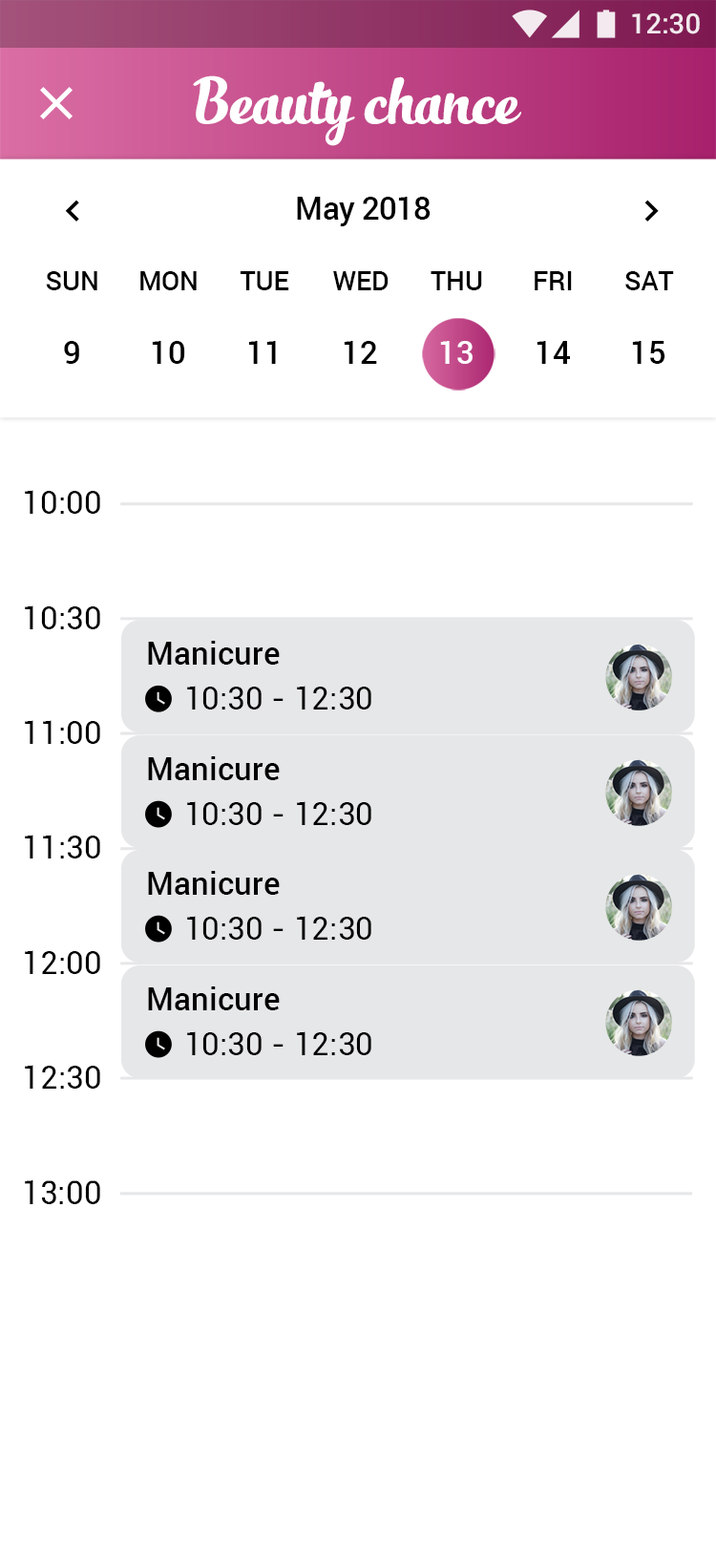
<style>
.page{position:relative;width:716px;height:1568px;background:#ffffff}
.page>*{position:absolute;margin:0}
.t1{font:27.8px "Roboto-Medium";color:#ffffff}
.t2{font:47.7px "SlimTony-Italic";color:#ffffff}
.t3{font:31.8px "Roboto-Medium";letter-spacing:-0.023em;color:#000000}
.t4{font:26.4px "Roboto-Medium";color:#000000}
.t5{font:31.8px "Roboto-Medium";color:#000000}
.t6{font:31.8px "Roboto-Medium";color:#ffffff}
.t7{font:31.8px "Roboto-Regular";color:#000000}
.t8{font:32.3px "Roboto-Regular";color:#000000}
</style>
<div class="page">
<p class="t1" style="left:632px;top:13px;width:68px;height:21px">12:30</p>
<p class="t2" style="left:193px;top:75px;width:328px;height:71px">Beauty chance</p>
<p class="t3" style="left:297px;top:197px;width:134px;height:29px">May 2018</p>
<p class="t4" style="left:46px;top:271px;width:51px;height:19px">SUN</p>
<p class="t4" style="left:140px;top:271px;width:57px;height:19px">MON</p>
<p class="t4" style="left:240px;top:271px;width:49px;height:19px">TUE</p>
<p class="t4" style="left:333px;top:271px;width:56px;height:19px">WED</p>
<p class="t4" style="left:431px;top:271px;width:51px;height:19px">THU</p>
<p class="t4" style="left:535px;top:271px;width:37px;height:19px">FRI</p>
<p class="t4" style="left:625px;top:271px;width:49px;height:19px">SAT</p>
<p class="t5" style="left:64px;top:341px;width:15px;height:23px">9</p>
<p class="t5" style="left:152px;top:341px;width:33px;height:23px">10</p>
<p class="t5" style="left:248px;top:341px;width:28px;height:23px">11</p>
<p class="t5" style="left:344px;top:341px;width:33px;height:23px">12</p>
<p class="t6" style="left:440px;top:341px;width:33px;height:23px">13</p>
<p class="t5" style="left:537px;top:341px;width:33px;height:23px">14</p>
<p class="t5" style="left:632px;top:341px;width:34px;height:23px">15</p>
<p class="t7" style="left:25px;top:490px;width:75px;height:24px">10:00</p>
<p class="t7" style="left:25px;top:605px;width:75px;height:24px">10:30</p>
<p class="t5" style="left:148px;top:641px;width:132px;height:24px">Manicure</p>
<p class="t7" style="left:187px;top:686px;width:184px;height:24px">10:30 - 12:30</p>
<p class="t7" style="left:25px;top:720px;width:75px;height:24px">11:00</p>
<p class="t5" style="left:148px;top:756px;width:132px;height:24px">Manicure</p>
<p class="t7" style="left:187px;top:801px;width:184px;height:24px">10:30 - 12:30</p>
<p class="t7" style="left:25px;top:835px;width:75px;height:23px">11:30</p>
<p class="t5" style="left:148px;top:871px;width:132px;height:24px">Manicure</p>
<p class="t7" style="left:187px;top:916px;width:184px;height:24px">10:30 - 12:30</p>
<p class="t7" style="left:25px;top:950px;width:75px;height:24px">12:00</p>
<p class="t5" style="left:148px;top:986px;width:132px;height:24px">Manicure</p>
<p class="t7" style="left:187px;top:1031px;width:184px;height:24px">10:30 - 12:30</p>
<p class="t7" style="left:25px;top:1065px;width:75px;height:24px">12:30</p>
<p class="t8" style="left:25px;top:1180px;width:75px;height:24px">13:00</p>
</div>
